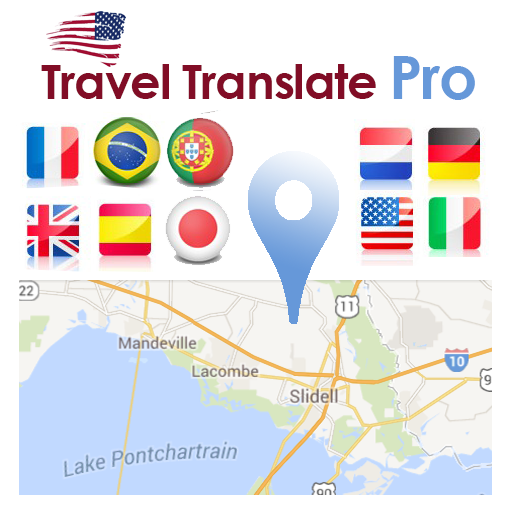
<style>
.page{position:relative;width:512px;height:512px;background:#ffffff}
.page>*{position:absolute;margin:0}
.t1{font:48px "CenturyGothic-Bold";letter-spacing:-0.025em;color:#810d26}
.t2{font:60px "CenturyGothic-Bold";letter-spacing:-0.025em;color:#6698d9}
</style>
<div class="page">
<p class="t1" style="left:41px;top:56px;width:434px;height:44px">Travel Translate <span class="t2">Pro</span></p>
</div>
